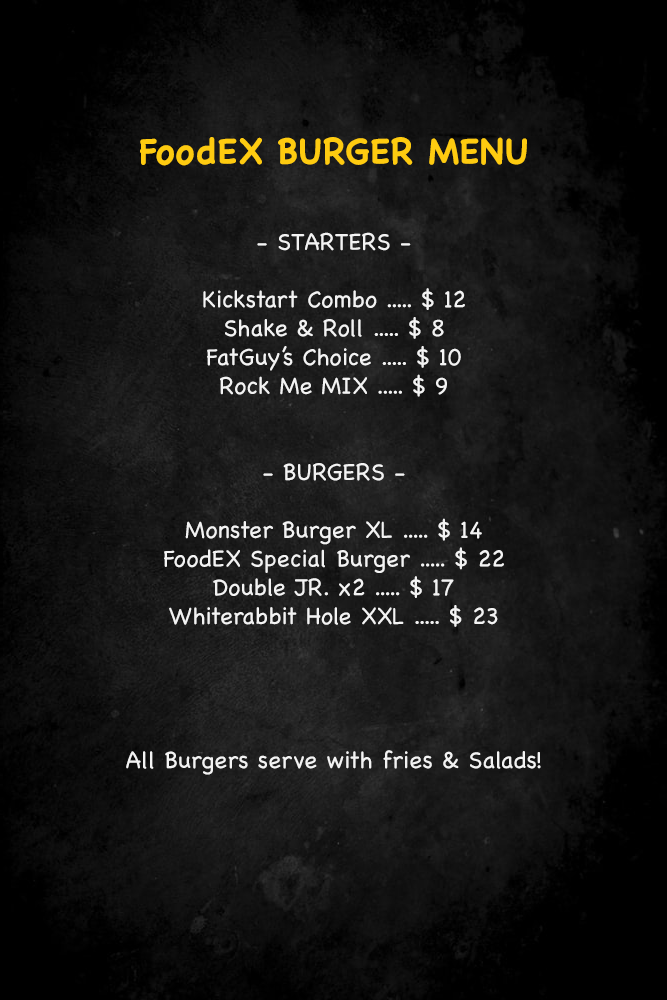
<style>
.page{position:relative;width:667px;height:1000px}
.page>*{position:absolute;margin:0}
.t1{font:24px "Chalkboard";color:#f3f3f3}
.t2{font:36px "Chalkboard-Bold";color:#fecb10}
</style>
<div class="page">
<p class="t1" style="left:126px;top:137px;width:415px;height:638px;text-align:center"><span class="t2">FoodEX BURGER MENU<br></span><br><br>- STARTERS -<br><br>Kickstart Combo ..... $ 12<br>Shake &amp; Roll ..... $ 8<br>FatGuy’s Choice ..... $ 10<br>Rock Me MIX ..... $ 9<br><br><br>- BURGERS -<br><br>Monster Burger XL ..... $ 14<br>FoodEX Special Burger ..... $ 22<br>Double JR. x2 ..... $ 17<br>Whiterabbit Hole XXL ..... $ 23<br><br><br><br><br>All Burgers serve with fries &amp; Salads!</p>
</div>
